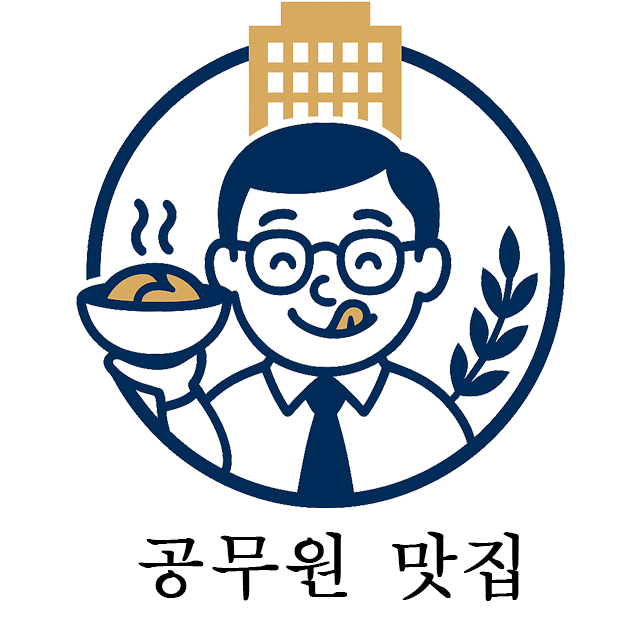
<style>
.page{position:relative;width:640px;height:640px;background:#ffffff}
.page>*{position:absolute;margin:0}
.t1{font:72px "AppleMyungjo";color:#000000;font-weight:bold}
</style>
<div class="page">
<p class="t1" style="left:138px;top:531px;width:381px;height:70px">공무원 맛집</p>
</div>
